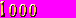
<style>
.page{position:relative;width:76px;height:18px;background:#ff00ff}
.page>*{position:absolute;margin:0}
.t1{font:15.2px "VNI-Hobo";scale:1.03 1}
.t2{font:18.2px "VNI-Hobo";scale:1.03 1}
</style>
<div class="page">
<p class="t1" style="left:0px;top:1px;width:37px;height:16px"><span class="t2">1</span>000</p>
</div>
